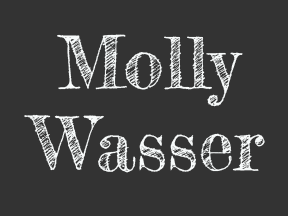
<style>
.page{position:relative;width:288px;height:216px;background:#333333}
.page>*{position:absolute;margin:0}
.t1{font:72px/81px "FrederickatheGreat-Regular";color:#f7fafa}
</style>
<div class="page">
<p class="t1" style="left:24px;top:34px;width:241px;height:139px;text-align:center">Molly <br>Wasser</p>
</div>
